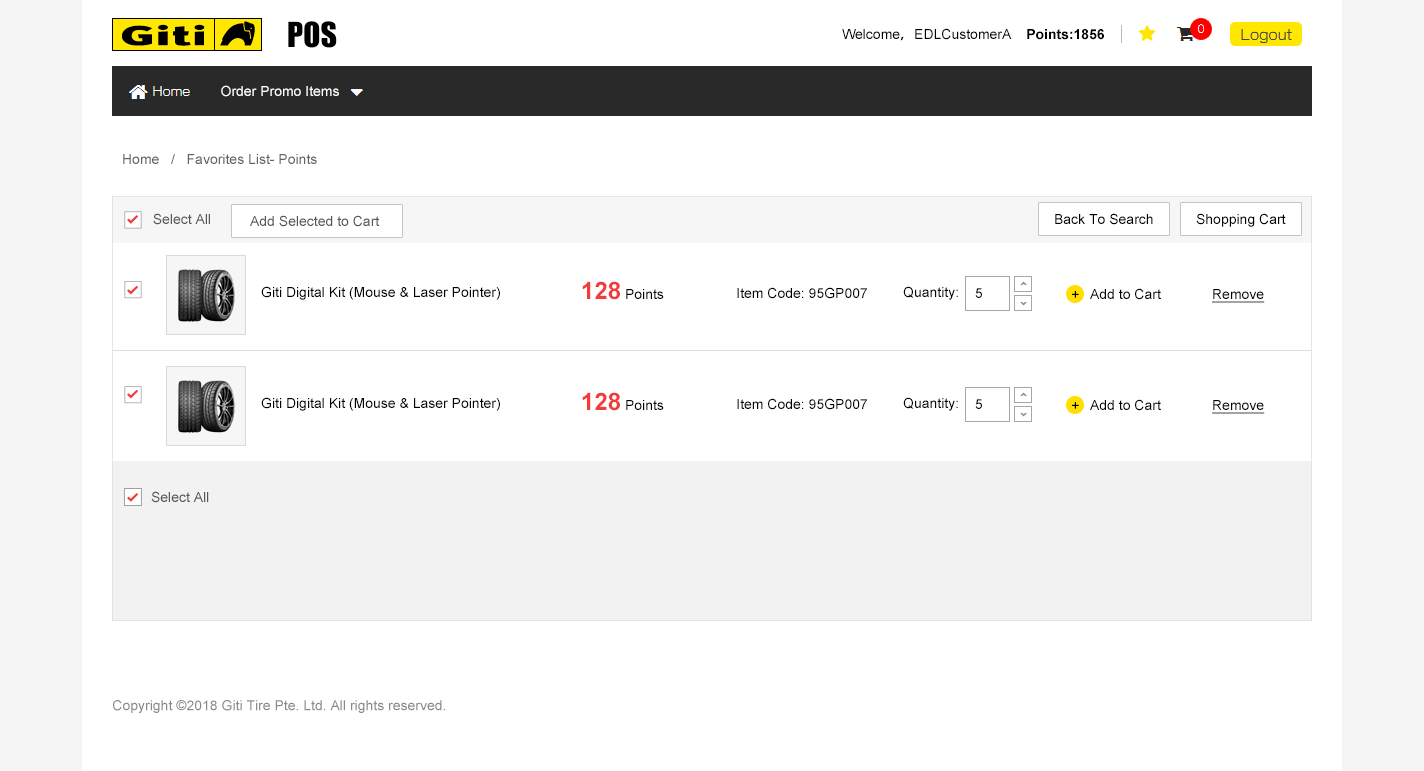
<style>
.page{position:relative;width:1424px;height:771px;background:#ffffff}
.page>*{position:absolute;margin:0}
.t1{font:32px "Impact";color:#000000}
.t2{font:14px "ArialMT";color:#000000}
.t3{font:14px "AdobeHeitiStd-Regular";color:#000000}
.t4{font:14px "Arial-BoldMT";color:#000000}
.t5{font:14px "ArialMT";color:#ffffff}
.t6{font:14px "ArialMT";color:#626262}
.t7{font:14px "ArialMT";color:#565656}
.t8{font:24px "Arial-BoldMT";color:#f23c3c}
.t9{font:14px "ArialMT";color:#000000;text-decoration:underline}
.t10{font:14px "ArialMT";color:#898989}
</style>
<div class="page">
<p class="t1" style="left:288px;top:21px;width:49px;height:27px">POS</p>
<p class="t2" style="left:842px;top:28px;width:262px;height:13px">Welcome<span class="t3">，</span>EDLCustomerA    <span class="t4">Points:1856</span></p>
<p class="t5" style="left:221px;top:85px;width:118px;height:12px">Order Promo Items</p>
<p class="t6" style="left:123px;top:154px;width:194px;height:10px">Home   /   Favorites List- Points</p>
<p class="t7" style="left:153px;top:213px;width:57px;height:12px">Select All</p>
<p class="t7" style="left:250px;top:215px;width:130px;height:12px">Add Selected to Cart</p>
<p class="t2" style="left:1055px;top:213px;width:98px;height:12px">Back To Search</p>
<p class="t2" style="left:1196px;top:213px;width:90px;height:14px">Shopping Cart</p>
<p class="t2" style="left:582px;top:281px;width:82px;height:19px"><span class="t8">128</span> Points</p>
<p class="t2" style="left:261px;top:286px;width:239px;height:14px">Giti Digital Kit (Mouse &amp; Laser Pointer)</p>
<p class="t2" style="left:737px;top:287px;width:130px;height:12px">Item Code: 95GP007</p>
<p class="t2" style="left:903px;top:286px;width:55px;height:14px">Quantity:</p>
<p class="t2" style="left:975px;top:288px;width:7px;height:10px">5</p>
<p class="t2" style="left:1072px;top:291px;width:7px;height:7px">+</p>
<p class="t2" style="left:1090px;top:288px;width:71px;height:12px">Add to Cart</p>
<p class="t9" style="left:1212px;top:289px;width:53px;height:14px">Remove</p>
<p class="t2" style="left:261px;top:397px;width:239px;height:14px">Giti Digital Kit (Mouse &amp; Laser Pointer)</p>
<p class="t2" style="left:582px;top:392px;width:82px;height:19px"><span class="t8">128</span> Points</p>
<p class="t2" style="left:737px;top:398px;width:130px;height:12px">Item Code: 95GP007</p>
<p class="t2" style="left:903px;top:397px;width:55px;height:14px">Quantity:</p>
<p class="t2" style="left:975px;top:399px;width:7px;height:10px">5</p>
<p class="t2" style="left:1090px;top:399px;width:71px;height:12px">Add to Cart</p>
<p class="t9" style="left:1212px;top:400px;width:53px;height:14px">Remove</p>
<p class="t2" style="left:1072px;top:402px;width:7px;height:7px">+</p>
<p class="t7" style="left:151px;top:491px;width:58px;height:12px">Select All</p>
<p class="t10" style="left:113px;top:700px;width:332px;height:13px">Copyright ©2018 Giti Tire Pte. Ltd. All rights reserved.</p>
</div>
